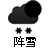
<style>
.page{position:relative;width:50px;height:48px;background:#ffffff}
.page>*{position:absolute;margin:0}
.t1{font:12px "OPPOSans-R";color:#000000}
</style>
<div class="page">
<p class="t1" style="left:14px;top:36px;width:22px;height:11px">阵雪</p>
</div>
